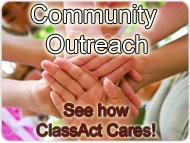
<style>
.page{position:relative;width:190px;height:143px}
.page>*{position:absolute;margin:0}
.t1{font:25px "ArialMT";color:#ffffff}
.t2{font:16.7px "ArialMT";color:#691313}
</style>
<div class="page">
<p class="t1" style="left:31px;top:4px;width:126px;height:50px;text-align:center">Community <br>Outreach</p>
<p class="t2" style="left:37px;top:103px;width:118px;height:34px;text-align:center">See how<br>ClassAct Cares!</p>
</div>
